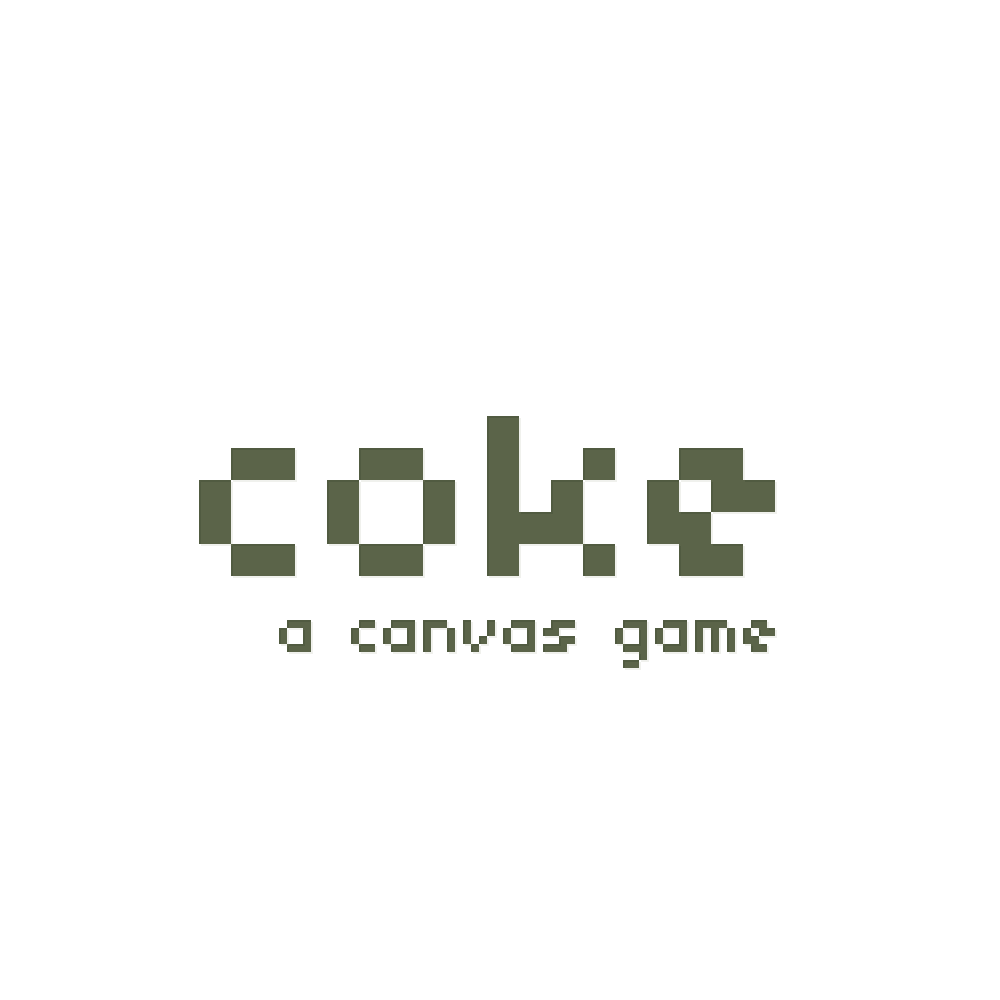
<style>
.page{position:relative;width:1000px;height:1000px;background:#ffffff}
.page>*{position:absolute;margin:0}
.t1{font:256px "04b03";color:#5b6449}
.t2{font:64px "04b03";color:#5b6449}
</style>
<div class="page">
<p class="t1" style="left:199px;top:416px;width:576px;height:160px">coke</p>
<p class="t2" style="left:279px;top:620px;width:496px;height:48px">a canvas game</p>
</div>
